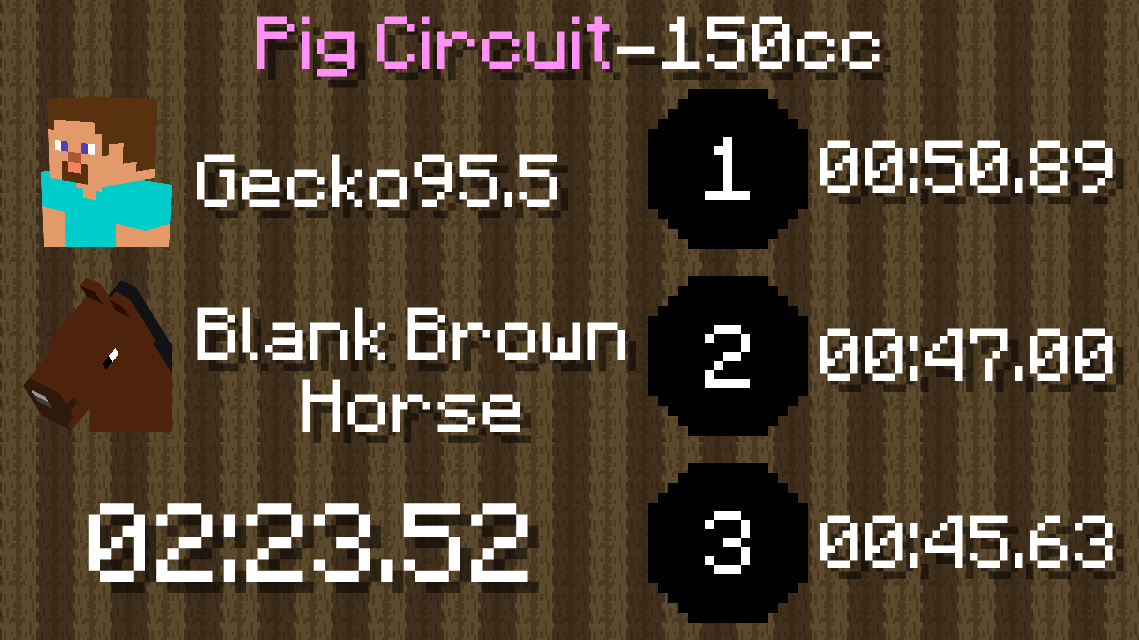
<style>
.page{position:relative;width:1139px;height:640px;background:#5c4a2f}
.page>*{position:absolute;margin:0}
.t1{font:60px "Minecraft";color:#ff90f8}
.t2{font:60px "Minecraft";color:#ffffff}
.t3{font:90px "Minecraft";color:#ffffff}
</style>
<div class="page">
<p class="t1" style="left:257px;top:16px;width:623px;height:61px">Pig Circuit<span class="t2">-150cc</span></p>
<p class="t2" style="left:820px;top:140px;width:293px;height:53px">00:50.89</p>
<p class="t2" style="left:197px;top:154px;width:360px;height:53px">Gecko95.5</p>
<p class="t2" style="left:197px;top:307px;width:428px;height:125px;text-align:center">Blank Brown<br>Horse</p>
<p class="t2" style="left:820px;top:328px;width:293px;height:53px">00:47.00</p>
<p class="t3" style="left:88px;top:503px;width:440px;height:79px">02:23.52</p>
<p class="t2" style="left:820px;top:515px;width:293px;height:53px">00:45.63</p>
</div>
